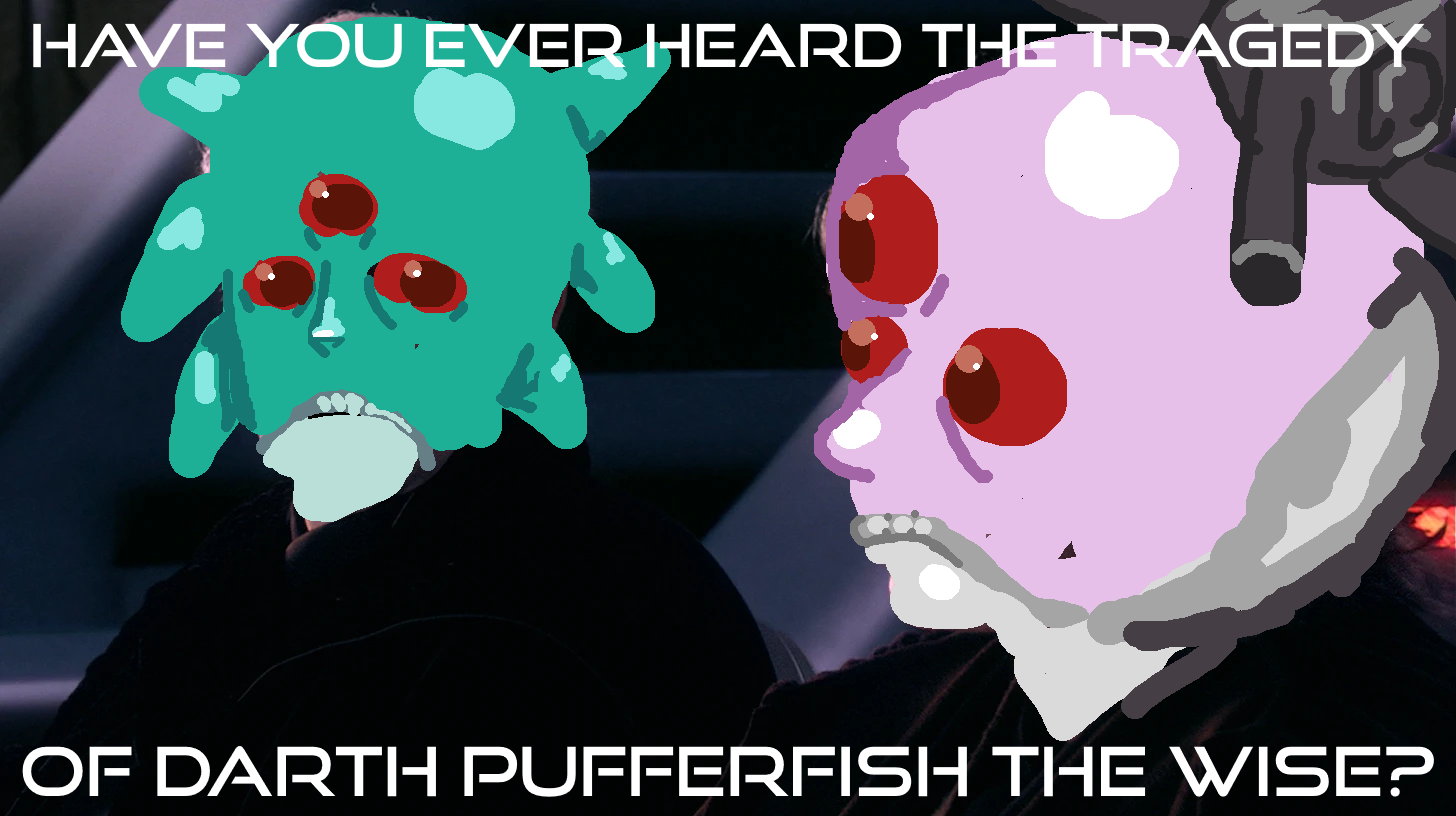
<style>
.page{position:relative;width:1456px;height:816px}
.page>*{position:absolute;margin:0}
.t1{font:59.4px "GoodTimesRg-Regular";color:#ffffff}
.t2{font:67.8px "GoodTimesRg-Regular";color:#ffffff}
</style>
<div class="page">
<p class="t1" style="left:33px;top:23px;width:1392px;height:45px">Have you ever heard the tragedy</p>
<p class="t2" style="left:22px;top:746px;width:1412px;height:51px">of darth Pufferfish the wise?</p>
</div>
